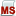
<style>
.page{position:relative;width:16px;height:16px}
.page>*{position:absolute;margin:0}
.t1{font:10px "Arial-BoldMT";color:#a40f00}
</style>
<div class="page">
<p class="t1" style="left:1px;top:6px;width:15px;height:8px">MS</p>
</div>
